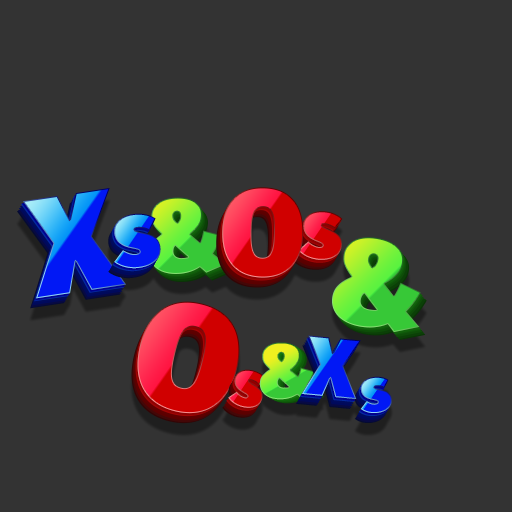
<style>
.page{position:relative;width:512px;height:512px;background:#333333}
.page>*{position:absolute;margin:0}
.t1{font:140.3px "FiraSans-Ultra"}
.t2{font:102.9px "FiraSans-Ultra"}
.t3{font:121.6px "FiraSans-Ultra"}
.t4{font:93.5px "FiraSans-Ultra"}
.t5{font:84.2px "FiraSans-Ultra"}
.t6{font:149.7px "FiraSans-Ultra"}
.t7{font:76.7px "FiraSans-Ultra"}
.t8{font:65.6px "FiraSans-Ultra"}
.t9{font:62.5px "FiraSans-Ultra"}
</style>
<div class="page">
<p class="t1" style="left:22px;top:187px;width:105px;height:112px;rotate:-9deg">X</p>
<p class="t2" style="left:149px;top:197px;width:78px;height:77px;rotate:-3deg">&amp;</p>
<p class="t3" style="left:222px;top:187px;width:82px;height:91px;rotate:1deg">O</p>
<p class="t4" style="left:114px;top:213px;width:47px;height:56px;rotate:-5deg">s</p>
<p class="t5" style="left:298px;top:211px;width:45px;height:49px;rotate:5deg">s</p>
<p class="t3" style="left:332px;top:237px;width:89px;height:96px;rotate:9deg">&amp;</p>
<p class="t6" style="left:137px;top:301px;width:103px;height:113px;rotate:14deg">O</p>
<p class="t7" style="left:259px;top:342px;width:59px;height:58px;rotate:-1deg">&amp;</p>
<p class="t5" style="left:302px;top:335px;width:59px;height:64px;rotate:5deg">X</p>
<p class="t8" style="left:228px;top:369px;width:38px;height:39px;rotate:14deg">s</p>
<p class="t9" style="left:360px;top:376px;width:32px;height:37px;rotate:-5deg">s</p>
</div>
